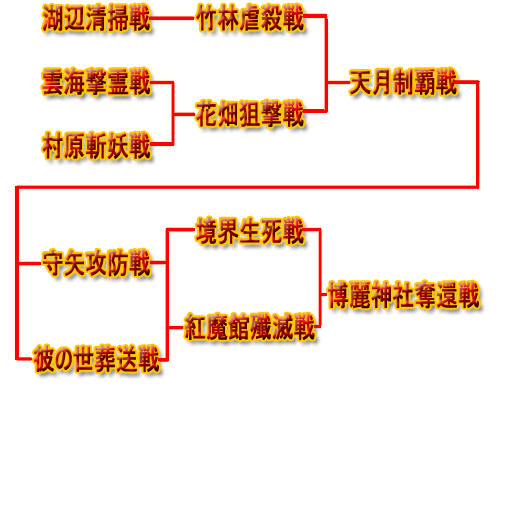
<style>
.page{position:relative;width:512px;height:512px;background:#ffffff}
.page>*{position:absolute;margin:0}
.t1{font:28.8px "MS-UIGothic";font-weight:bold;scale:0.75 1}
</style>
<div class="page">
<p class="t1" style="left:42px;top:4px;width:108px;height:27px">湖辺清掃戦</p>
<p class="t1" style="left:196px;top:4px;width:108px;height:27px">竹林虐殺戦</p>
<p class="t1" style="left:42px;top:68px;width:108px;height:27px">雲海撃霊戦</p>
<p class="t1" style="left:350px;top:68px;width:107px;height:28px">天月制覇戦</p>
<p class="t1" style="left:196px;top:100px;width:108px;height:27px">花畑狙撃戦</p>
<p class="t1" style="left:42px;top:132px;width:108px;height:27px">村原斬妖戦</p>
<p class="t1" style="left:196px;top:217px;width:108px;height:27px">境界生死戦</p>
<p class="t1" style="left:43px;top:249px;width:107px;height:28px">守矢攻防戦</p>
<p class="t1" style="left:328px;top:281px;width:151px;height:28px">博麗神社奪還戦</p>
<p class="t1" style="left:185px;top:313px;width:130px;height:27px">紅魔館殲滅戦</p>
<p class="t1" style="left:33px;top:345px;width:126px;height:28px">彼の世葬送戦</p>
</div>
